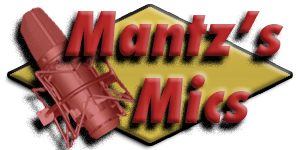
<style>
.page{position:relative;width:300px;height:150px;background:#ffffff}
.page>*{position:absolute;margin:0}
.t1{font:60px "Futura-CondensedExtraBold";font-style:italic}
</style>
<div class="page">
<p class="t1" style="left:64px;top:11px;width:220px;height:45px">Mantz’s</p>
<p class="t1" style="left:131px;top:74px;width:120px;height:49px">Mics</p>
</div>
